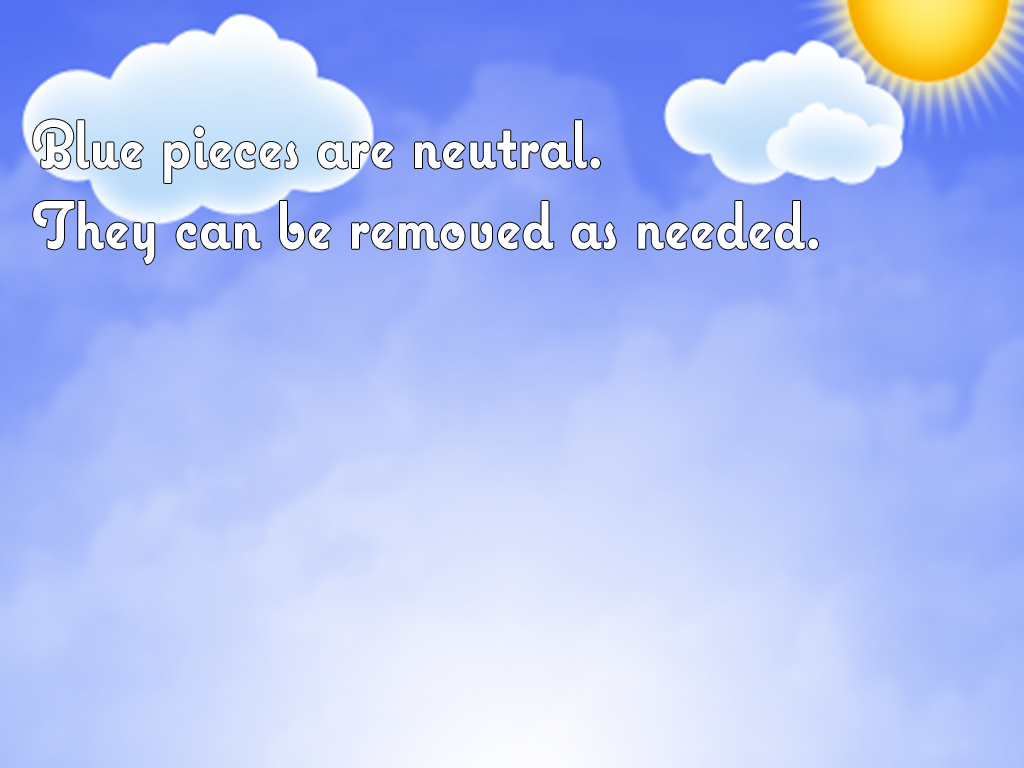
<style>
.page{position:relative;width:1024px;height:768px}
.page>*{position:absolute;margin:0}
.t1{font:67.2px "CoquetteBold";color:#ffffff;scale:0.89 1}
</style>
<div class="page">
<p class="t1" style="left:33px;top:119px;width:785px;height:146px">Blue pieces are neutral.<br>They can be removed as needed.</p>
</div>
